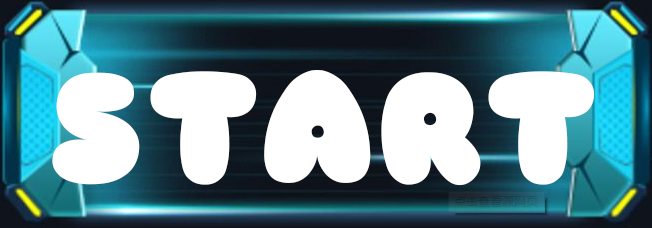
<style>
.page{position:relative;width:652px;height:228px;background:#ffffff}
.page>*{position:absolute;margin:0}
.t1{font:155.9px "Sniglet";color:#ffffff;font-variant:small-caps}
</style>
<div class="page">
<p class="t1" style="left:52px;top:70px;width:543px;height:116px">START</p>
</div>
